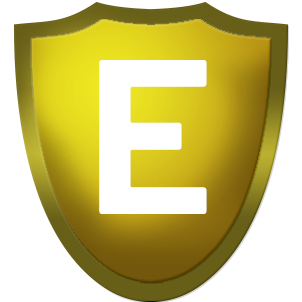
<style>
.page{position:relative;width:302px;height:302px;background:#ffffff}
.page>*{position:absolute;margin:0}
.t1{font:220px "Barlow-Bold";color:#ffffff}
</style>
<div class="page">
<p class="t1" style="left:99px;top:60px;width:108px;height:154px">E</p>
</div>
